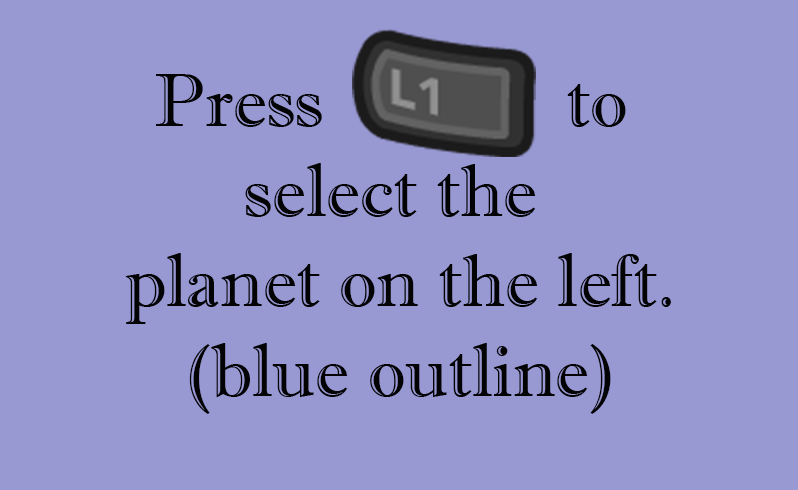
<style>
.page{position:relative;width:798px;height:490px;background:#9898d3}
.page>*{position:absolute;margin:0}
.t1{font:74.8px "ImprintMT-Shadow";color:#030303}
</style>
<div class="page">
<p class="t1" style="left:125px;top:74px;width:546px;height:340px;text-align:center">Press             to <br>select the <br>planet on the left.<br>(blue outline)</p>
</div>
